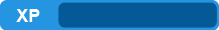
<style>
.page{position:relative;width:219px;height:30px;background:#035a96}
.page>*{position:absolute;margin:0}
.t1{font:18px "Arial-BoldMT";color:#ffffff}
</style>
<div class="page">
<p class="t1" style="left:16px;top:9px;width:24px;height:13px">XP</p>
</div>
